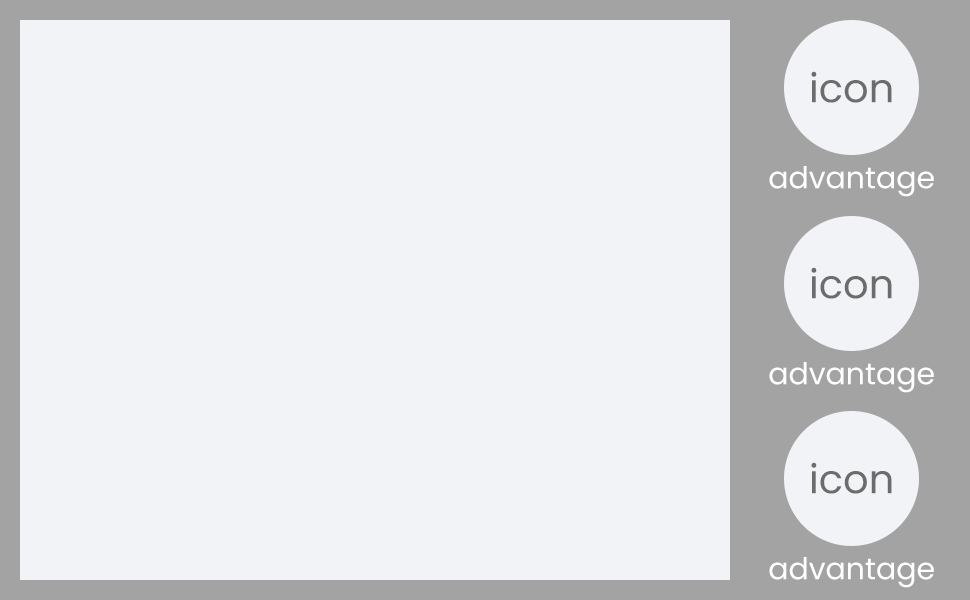
<style>
.page{position:relative;width:970px;height:600px;background:#f2f3f6}
.page>*{position:absolute;margin:0}
.t1{font:40px "Poppins-Regular";color:#6c6c6c}
.t2{font:30px "Poppins-Regular";color:#ffffff}
</style>
<div class="page">
<p class="t1" style="left:811px;top:71px;width:81px;height:32px">icon</p>
<p class="t2" style="left:769px;top:166px;width:165px;height:31px">advantage</p>
<p class="t1" style="left:811px;top:267px;width:81px;height:32px">icon</p>
<p class="t2" style="left:769px;top:362px;width:165px;height:31px">advantage</p>
<p class="t1" style="left:811px;top:462px;width:81px;height:32px">icon</p>
<p class="t2" style="left:769px;top:557px;width:165px;height:31px">advantage</p>
</div>
